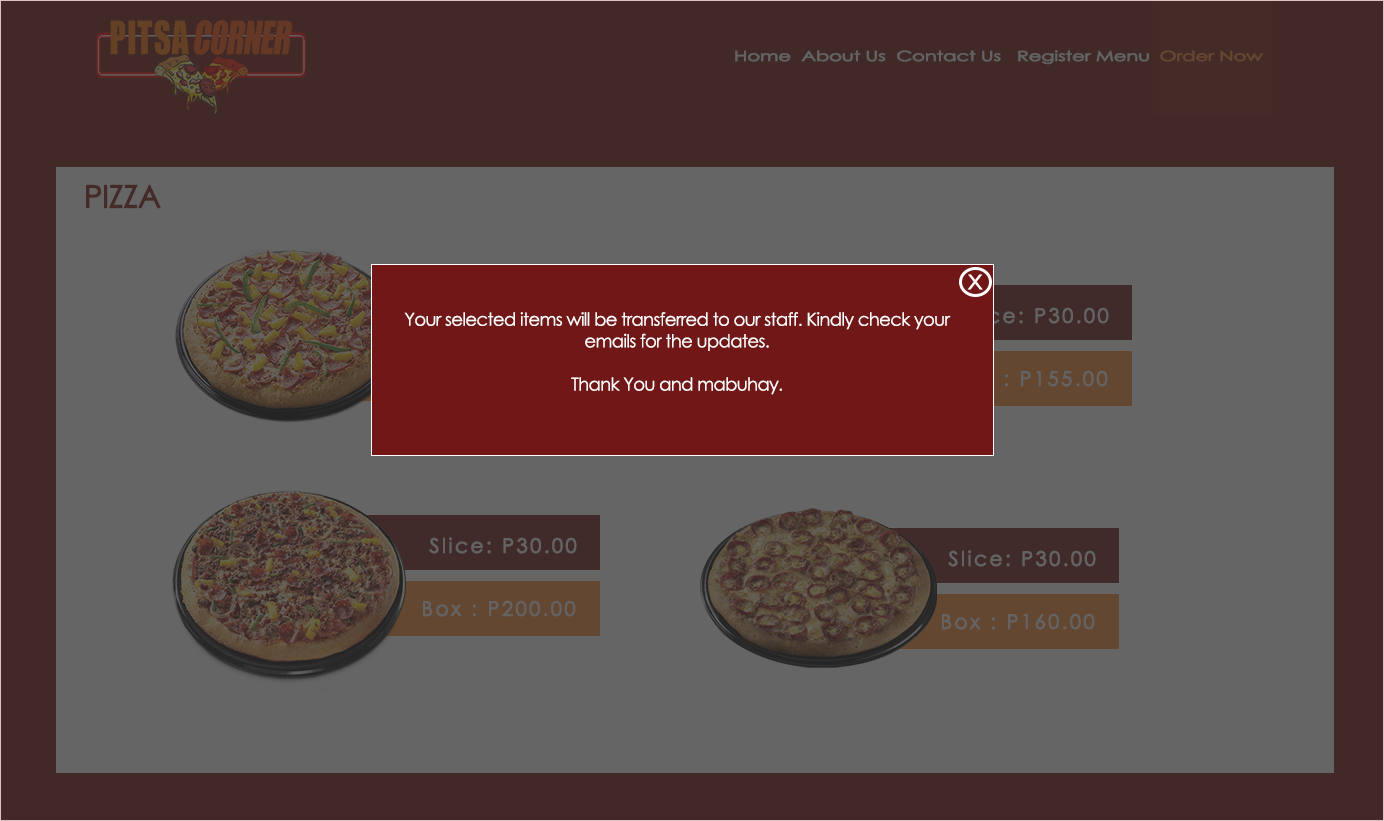
<style>
.page{position:relative;width:1384px;height:821px;background:#646564}
.page>*{position:absolute;margin:0}
.t1{font:13.9px "CenturyGothic";letter-spacing:-0.035em;color:#636363;font-weight:bold;scale:1.41 1}
.t2{font:30.9px "CenturyGothic";letter-spacing:-0.035em;color:#452b28;font-weight:bold}
.t3{font:27.8px "CenturyGothic";letter-spacing:-0.035em;color:#fffafa;scale:1.08 1}
.t4{font:18px "CenturyGothic";letter-spacing:-0.035em;color:#fffafa}
.t5{font:20px "CenturyGothic";letter-spacing:0.1em;color:#646363;font-weight:bold}
.t6{font:20px "CenturyGothic";letter-spacing:0.1em;font-weight:bold}
</style>
<div class="page">
<p class="t1" style="left:735px;top:50px;width:528px;height:15px">Home  About Us  Contact Us   Register Menu  Order Now</p>
<p class="t2" style="left:86px;top:184px;width:75px;height:25px">PIZZA</p>
<p class="t3" style="left:967px;top:274px;width:16px;height:16px">x</p>
<p class="t4" style="left:404px;top:312px;width:547px;height:83px;text-align:center">Your selected items will be transferred to our staff. Kindly check your emails for the updates.<br><br>Thank You and mabuhay.</p>
<p class="t5" style="left:961px;top:307px;width:148px;height:17px">Slice: P30.00</p>
<p class="t6" style="left:955px;top:370px;width:153px;height:17px">Box : P155.00</p>
<p class="t5" style="left:429px;top:537px;width:148px;height:17px">Slice: P30.00</p>
<p class="t5" style="left:948px;top:550px;width:148px;height:17px">Slice: P30.00</p>
<p class="t5" style="left:423px;top:600px;width:153px;height:17px">Box : P200.00</p>
<p class="t5" style="left:942px;top:613px;width:153px;height:17px">Box : P160.00</p>
</div>
